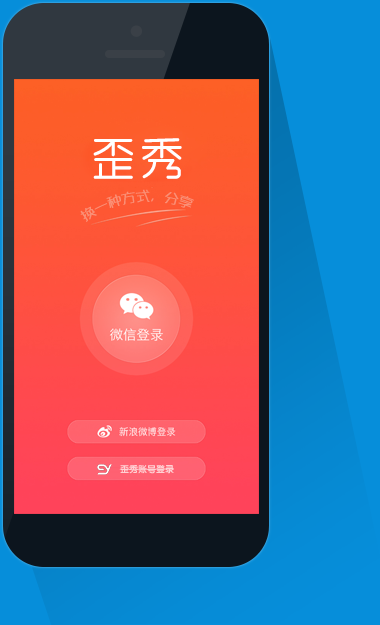
<style>
.page{position:relative;width:380px;height:625px}
.page>*{position:absolute;margin:0}
.t1{font:45px "MFYueYuan_Noncommercial-Regular";letter-spacing:0.075em;color:#ffffff}
.t2{font:12px "MFYaYuan_Noncommercial-Regular";letter-spacing:0.075em;color:#fa9076}
.t3{font:9px "FZY4JW--GB1-0";color:#ffd1d4}
</style>
<div class="page">
<p class="t1" style="left:93px;top:138px;width:89px;height:41px">歪秀</p>
<p class="t2" style="left:80px;top:189px;width:114px;height:33px;rotate:-6deg">换一种方式，分享</p>
<p class="t3" style="left:119px;top:465px;width:55px;height:9px">歪秀账号登录</p>
</div>
